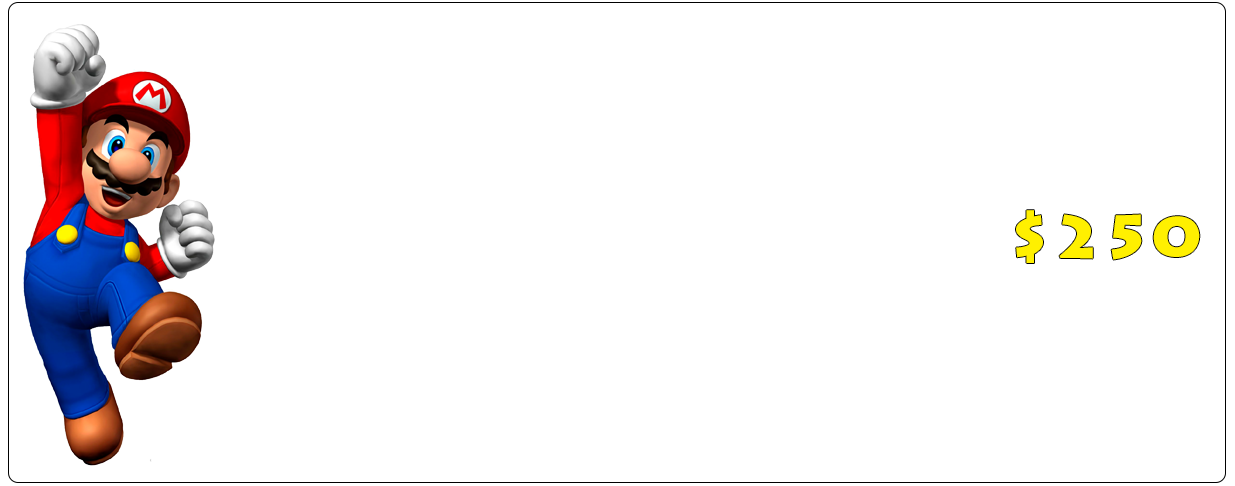
<style>
.page{position:relative;width:1235px;height:486px;background:#ffffff}
.page>*{position:absolute;margin:0}
.t1{font:60.1px "LithosPro-Black";color:#fff000}
</style>
<div class="page">
<p class="t1" style="left:1016px;top:210px;width:184px;height:53px">$250</p>
</div>
